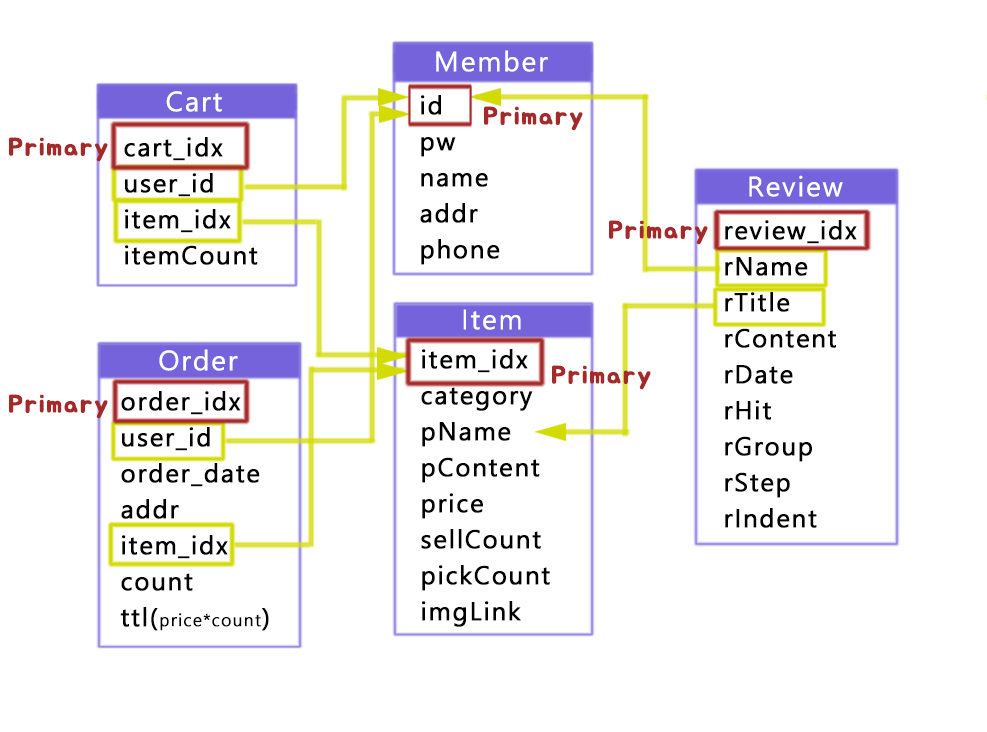
<style>
.page{position:relative;width:987px;height:732px;background:#ffffff}
.page>*{position:absolute;margin:0}
.t1{font:27px "MalgunGothic";letter-spacing:0.05em;color:#ffffff;font-weight:bold}
.t2{font:25px/36px "MalgunGothic";letter-spacing:0.05em;color:#010101;font-weight:bold}
.t3{font:25px "BMJUA";letter-spacing:0.05em;color:#a62929;font-weight:bold}
.t4{font:17px/36px "MalgunGothic";letter-spacing:0.05em;color:#010101;font-weight:bold}
</style>
<div class="page">
<p class="t1" style="left:436px;top:50px;width:112px;height:22px">Member</p>
<p class="t1" style="left:166px;top:91px;width:56px;height:21px">Cart</p>
<p class="t2" style="left:420px;top:95px;width:80px;height:170px">id<br>pw<br>name<br>addr<br>phone</p>
<p class="t3" style="left:484px;top:106px;width:99px;height:25px">Primary</p>
<p class="t3" style="left:9px;top:137px;width:99px;height:25px">Primary</p>
<p class="t2" style="left:124px;top:137px;width:134px;height:128px">cart_idx<br>user_id<br>item_idx<br>itemCount</p>
<p class="t1" style="left:749px;top:175px;width:94px;height:22px">Review</p>
<p class="t3" style="left:609px;top:220px;width:99px;height:25px">Primary</p>
<p class="t2" style="left:725px;top:220px;width:132px;height:308px">review_idx<br>rName<br>rTitle<br>rContent<br>rDate<br>rHit<br>rGroup<br>rStep<br>rIndent</p>
<p class="t1" style="left:463px;top:309px;width:58px;height:21px">Item</p>
<p class="t1" style="left:159px;top:349px;width:79px;height:22px">Order</p>
<p class="t2" style="left:421px;top:349px;width:129px;height:278px">item_idx<br>category<br>pName<br>pContent<br>price<br>sellCount<br>pickCount<br>imgLink</p>
<p class="t3" style="left:552px;top:365px;width:99px;height:25px">Primary</p>
<p class="t3" style="left:9px;top:394px;width:99px;height:25px">Primary</p>
<p class="t2" style="left:120px;top:391px;width:149px;height:240px">order_idx<br>user_id<br>order_date<br>addr<br>item_idx<br>count<br>ttl(<span class="t4">price*count</span>)</p>
</div>
